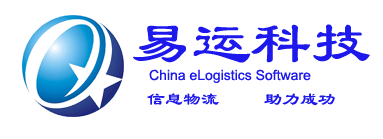
<style>
.page{position:relative;width:383px;height:139px;background:#ffffff}
.page>*{position:absolute;margin:0}
.t1{font:60px "LiSu";color:#1d18eb}
.t2{font:14px "ArialMT";color:#1d18eb}
.t3{font:18px "LiSu";color:#1d18eb}
</style>
<div class="page">
<p class="t1" style="left:133px;top:24px;width:237px;height:39px">易运科技</p>
<p class="t2" style="left:149px;top:69px;width:162px;height:14px">China eLogistics Software</p>
<p class="t3" style="left:147px;top:93px;width:188px;height:13px">信息物流     助力成功</p>
</div>
